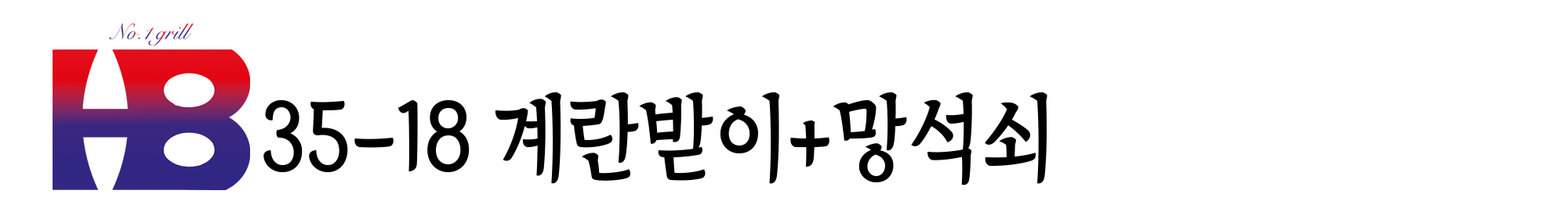
<style>
.page{position:relative;width:1568px;height:205px;background:#ffffff}
.page>*{position:absolute;margin:0}
.t1{font:94.1px "TheIndependenceHallofKorea-Regular";color:#000000;scale:0.89 1}
.t2{font:93.7px "TheIndependenceHallofKorea-Regular";color:#000000;scale:0.89 1}
</style>
<div class="page">
<p class="t1" style="left:263px;top:93px;width:784px;height:93px"><span class="t2">35-18 </span>계란받이+망석쇠</p>
</div>
